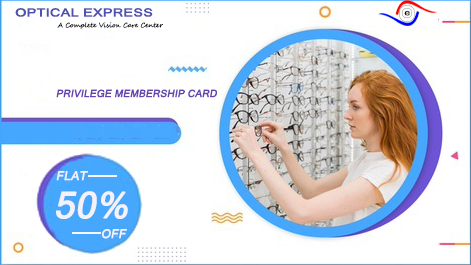
<style>
.page{position:relative;width:471px;height:265px;background:#ffffff}
.page>*{position:absolute;margin:0}
.t1{font:11.1px "MicrosoftSansSerif";color:#4f51b0;font-weight:bold;scale:1.29 1}
.t2{font:8.3px "MicrosoftSansSerif";color:#080606;scale:1.27 1}
.t3{font:6.5px "SegoeScript";color:#080606}
.t4{font:10px "MicrosoftSansSerif";color:#6544b0;font-weight:bold;font-style:italic}
.t5{font:12px "MicrosoftSansSerif";color:#f4f1f9;font-weight:bold;font-style:italic}
.t6{font:36px "MicrosoftSansSerif";color:#f4f1f9;font-weight:bold;font-style:italic}
</style>
<div class="page">
<p class="t1" style="left:15px;top:8px;width:138px;height:9px">OPTICAL EXPRESS</p>
<p class="t2" style="left:404px;top:10px;width:6px;height:6px">e</p>
<p class="t3" style="left:57px;top:22px;width:106px;height:8px">A Complete Vision Care Center</p>
<p class="t4" style="left:56px;top:89px;width:161px;height:9px">PRIVILEGE MEMBERSHIP CARD</p>
<p class="t5" style="left:56px;top:171px;width:32px;height:10px">FLAT</p>
<p class="t6" style="left:56px;top:191px;width:72px;height:28px">50%</p>
<p class="t5" style="left:102px;top:229px;width:25px;height:10px">OFF</p>
</div>
